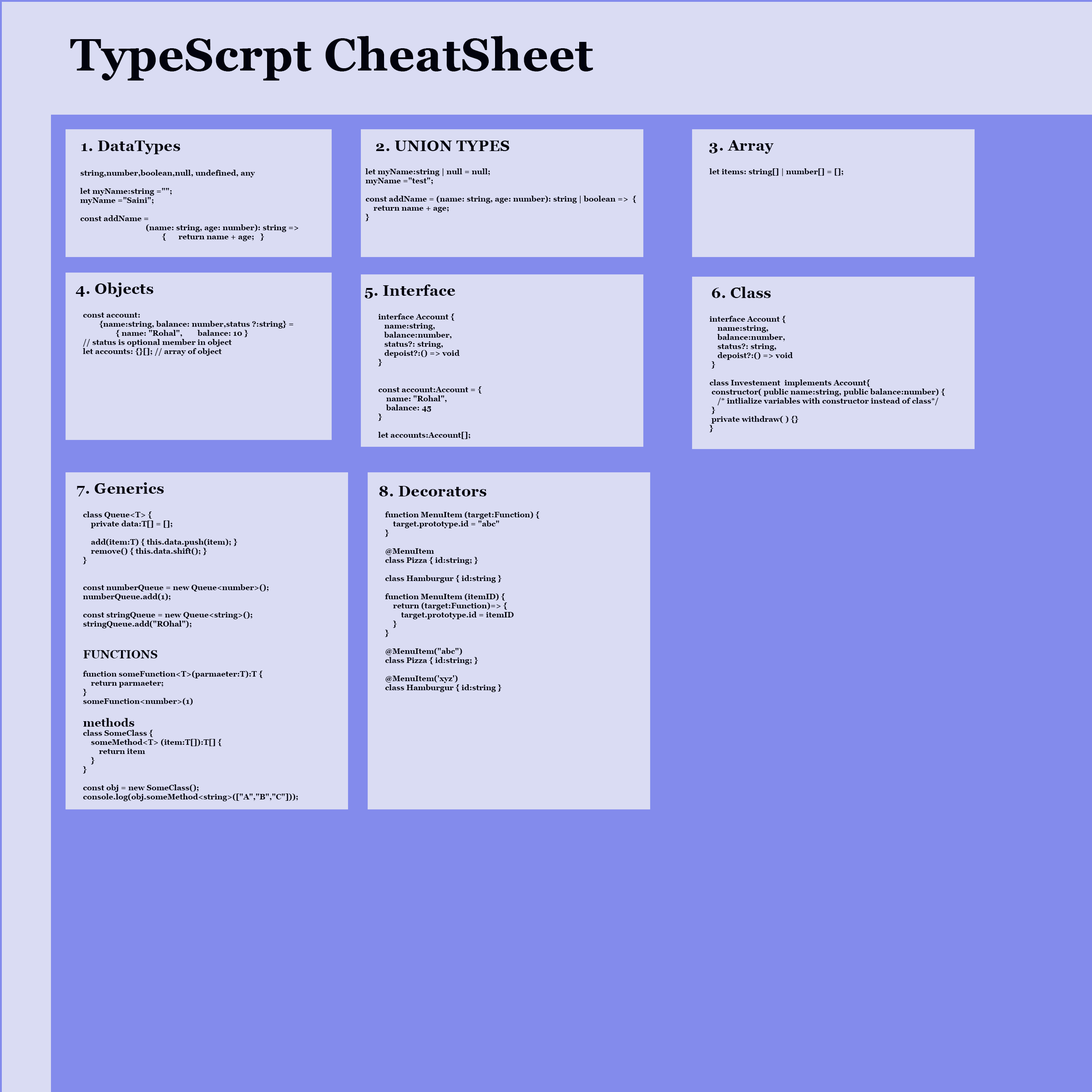
<style>
.page{position:relative;width:1092px;height:1092px;background:#838bec}
.page>*{position:absolute;margin:0}
.t1{font:45.5px "Georgia-Bold";letter-spacing:0.01em;color:#02030d}
.t2{font:15.2px "Georgia-Bold";letter-spacing:0.01em;color:#02030d}
.t3{font:7.6px "Georgia-Bold";letter-spacing:0.01em;color:#02030d}
.t4{font:11.4px "Georgia-Bold";letter-spacing:0.01em;color:#02030d}
</style>
<div class="page">
<p class="t1" style="left:70px;top:36px;width:523px;height:45px">TypeScrpt CheatSheet</p>
<p class="t2" style="left:81px;top:141px;width:99px;height:13px">1. DataTypes</p>
<p class="t2" style="left:376px;top:141px;width:134px;height:10px">2. UNION TYPES</p>
<p class="t2" style="left:709px;top:140px;width:65px;height:14px">3. Array</p>
<p class="t3" style="left:80px;top:170px;width:218px;height:71px">string,number,boolean,null, undefined, any<br><br>let myName:string ="";<br>myName ="Saini";<br><br>const addName = <br>    (name: string, age: number): string =&gt;  <br>     { return name + age; }</p>
<p class="t3" style="left:365px;top:168px;width:271px;height:53px">let myName:string | null = null;<br>myName ="test";<br><br>const addName = (name: string, age: number): string | boolean =&gt;  {<br>    return name + age;<br>}</p>
<p class="t3" style="left:709px;top:168px;width:135px;height:8px">let items: string[] | number[] = [];</p>
<p class="t2" style="left:76px;top:283px;width:77px;height:14px">4. Objects</p>
<p class="t2" style="left:364px;top:284px;width:91px;height:14px">5. Interface</p>
<p class="t2" style="left:712px;top:287px;width:59px;height:11px">6. Class</p>
<p class="t3" style="left:83px;top:313px;width:210px;height:43px">const account: <br> {name:string, balance: number,status ?:string} = <br>  { name: "Rohal", balance: 10 }<br>// status is optional member in object<br>let accounts: {}[]; // array of object</p>
<p class="t3" style="left:378px;top:313px;width:103px;height:126px">interface Account {<br>   name:string,<br>   balance:number,<br>   status?: string,<br>   depoist?:() =&gt; void <br>}<br><br><br>const account:Account = {<br>    name: "Rohal",<br>    balance: 45<br>}<br><br>let accounts:Account[];</p>
<p class="t3" style="left:709px;top:316px;width:236px;height:116px">interface Account {<br>    name:string,<br>    balance:number,<br>    status?: string,<br>    depoist?:() =&gt; void <br> }<br> <br>class Investement  implements Account{<br> constructor( public name:string, public balance:number) { <br>    /* intlialize variables with constructor instead of class*/<br> } <br> private withdraw( ) {}<br>}</p>
<p class="t2" style="left:77px;top:482px;width:87px;height:14px">7. Generics</p>
<p class="t2" style="left:379px;top:486px;width:107px;height:10px">8. Decorators</p>
<p class="t3" style="left:83px;top:511px;width:215px;height:290px">class Queue&lt;T&gt; {<br>    private data:T[] = [];<br><br>    add(item:T) { this.data.push(item); }<br>    remove() { this.data.shift(); }<br>}<br><br><br>const numberQueue = new Queue&lt;number&gt;();<br>numberQueue.add(1);<br><br>const stringQueue = new Queue&lt;string&gt;();<br>stringQueue.add("ROhal");<br><br><br><span class="t4">FUNCTIONS<br></span><br>function someFunction&lt;T&gt;(parmaeter:T):T {<br>    return parmaeter;<br>}<br>someFunction&lt;number&gt;(1)<br><br><span class="t4">methods<br></span>class SomeClass {<br>    someMethod&lt;T&gt; (item:T[]):T[] {<br>        return item<br>    }<br>}<br><br>const obj = new SomeClass();<br>console.log(obj.someMethod&lt;string&gt;(["A","B","C"]));</p>
<p class="t3" style="left:385px;top:511px;width:154px;height:181px">function MenuItem (target:Function) {<br>    target.prototype.id = "abc"<br>}<br><br>@MenuItem<br>class Pizza { id:string; }<br><br>class Hamburgur { id:string }<br><br>function MenuItem (itemID) {<br>    return (target:Function)=&gt; {<br>        target.prototype.id = itemID<br>    }<br>}<br><br>@MenuItem("abc")<br>class Pizza { id:string; }<br><br>@MenuItem('xyz')<br>class Hamburgur { id:string }</p>
</div>
